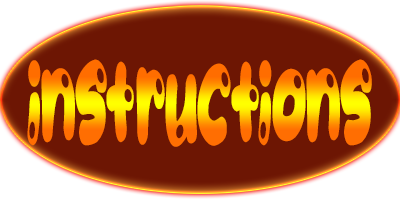
<style>
.page{position:relative;width:400px;height:200px;background:#6d1603}
.page>*{position:absolute;margin:0}
.t1{font:89.6px "JuicyFruity";scale:0.43 1}
</style>
<div class="page">
<p class="t1" style="left:27px;top:59px;width:345px;height:88px">instructions</p>
</div>
